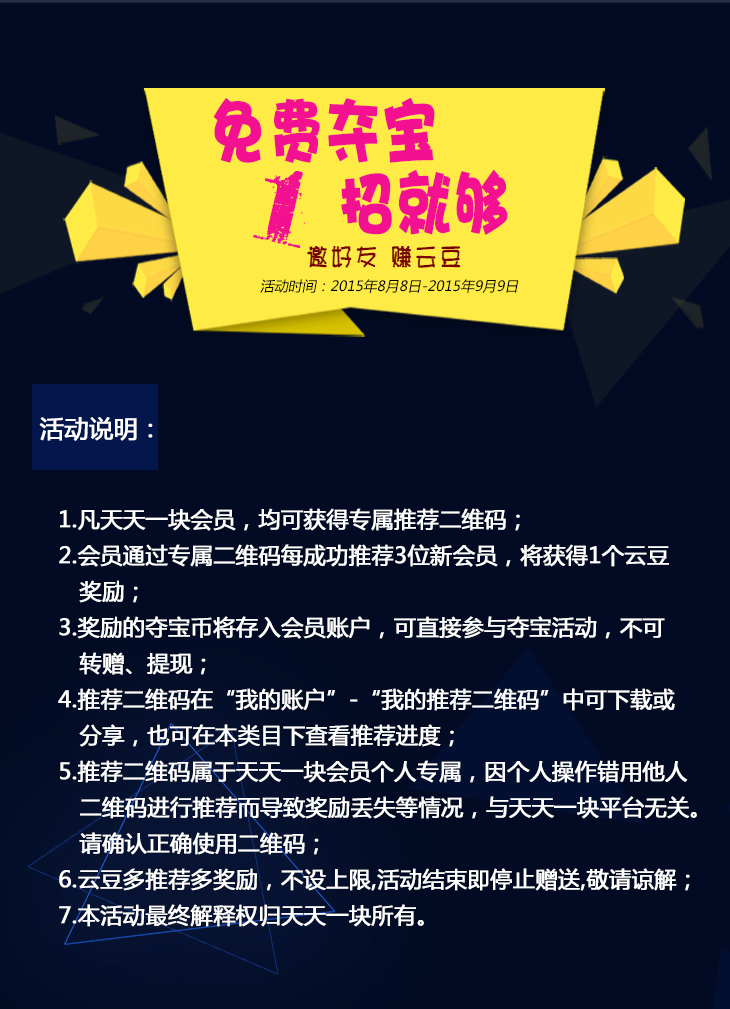
<style>
.page{position:relative;width:730px;height:1009px;background:#020b23}
.page>*{position:absolute;margin:0}
.t1{font:70.4px/72px "DFPHaiBaoW12";color:#f31191;text-transform:uppercase;font-weight:bold;scale:0.79 1}
.t2{font:100px "hardcorium";color:#f31191;text-transform:uppercase;font-weight:bold}
.t3{font:24px "TanhuangEG-Bold-GB";color:#7a0101;text-transform:uppercase;font-weight:bold}
.t4{font:14px "MicrosoftYaHei";color:#000000;font-style:italic}
.t5{font:24px "MicrosoftYaHei";color:#ffffff;text-transform:uppercase;font-weight:bold}
.t6{font:22px/36px "MicrosoftYaHei";color:#ffffff;text-transform:uppercase;font-weight:bold}
</style>
<div class="page">
<p class="t1" style="left:213px;top:97px;width:295px;height:138px;text-align:center">免费夺宝<br>          招就够</p>
<p class="t2" style="left:253px;top:171px;width:53px;height:78px;rotate:9deg">1</p>
<p class="t3" style="left:307px;top:246px;width:154px;height:22px">邀好友 赚云豆</p>
<p class="t4" style="left:260px;top:279px;width:259px;height:14px">活动时间：2015年8月8日-2015年9月9日</p>
<p class="t5" style="left:39px;top:417px;width:114px;height:24px">活动说明：</p>
<p class="t6" style="left:58px;top:508px;width:639px;height:419px">1.凡天天一块会员，均可获得专属推荐二维码；<br>2.会员通过专属二维码每成功推荐3位新会员，将获得1个云豆<br>   奖励；<br>3.奖励的夺宝币将存入会员账户，可直接参与夺宝活动，不可<br>   转赠、提现；<br>4.推荐二维码在“我的账户”-“我的推荐二维码”中可下载或<br>   分享，也可在本类目下查看推荐进度；<br>5.推荐二维码属于天天一块会员个人专属，因个人操作错用他人<br>   二维码进行推荐而导致奖励丢失等情况，与天天一块平台无关。<br>   请确认正确使用二维码；<br>6.云豆多推荐多奖励，不设上限,活动结束即停止赠送,敬请谅解；<br>7.本活动最终解释权归天天一块所有。</p>
</div>
